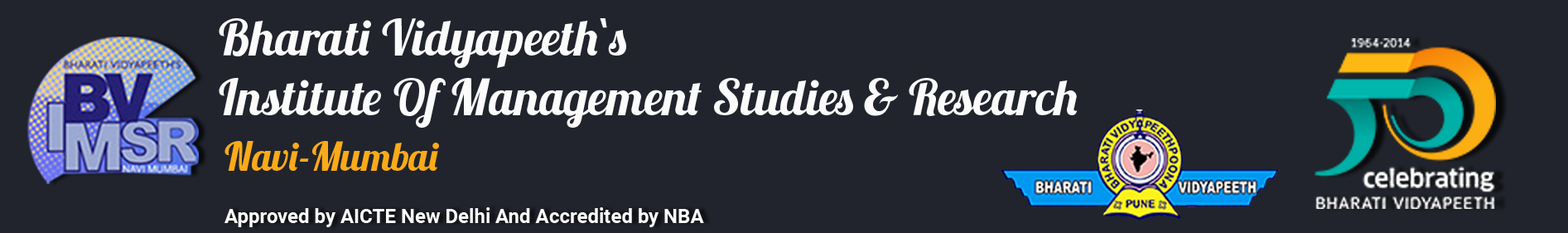
<style>
.page{position:relative;width:1568px;height:233px;background:#21242c}
.page>*{position:absolute;margin:0}
.t1{font:49.7px "Lobster1.3";color:#fbfbfb}
.t2{font:39.8px "Lobster1.3";color:#fcaa19}
.t3{font:19.9px "Roboto-Bold";color:#fefdfd}
</style>
<div class="page">
<p class="t1" style="left:219px;top:18px;width:407px;height:50px">Bharati Vidyapeeth`s</p>
<p class="t1" style="left:219px;top:78px;width:859px;height:50px">Institute Of Management Studies &amp; Research</p>
<p class="t2" style="left:224px;top:141px;width:215px;height:30px">Navi-Mumbai</p>
<p class="t3" style="left:224px;top:207px;width:480px;height:20px">Approved by AICTE New Delhi And Accredited by NBA</p>
</div>
